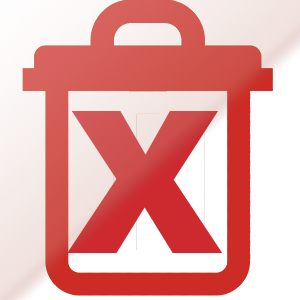
<style>
.page{position:relative;width:300px;height:300px;background:#ffffff}
.page>*{position:absolute;margin:0}
.t1{font:198.8px "Arial-Black";color:#cd2a2f}
</style>
<div class="page">
<p class="t1" style="left:67px;top:111px;width:156px;height:142px">X</p>
</div>
